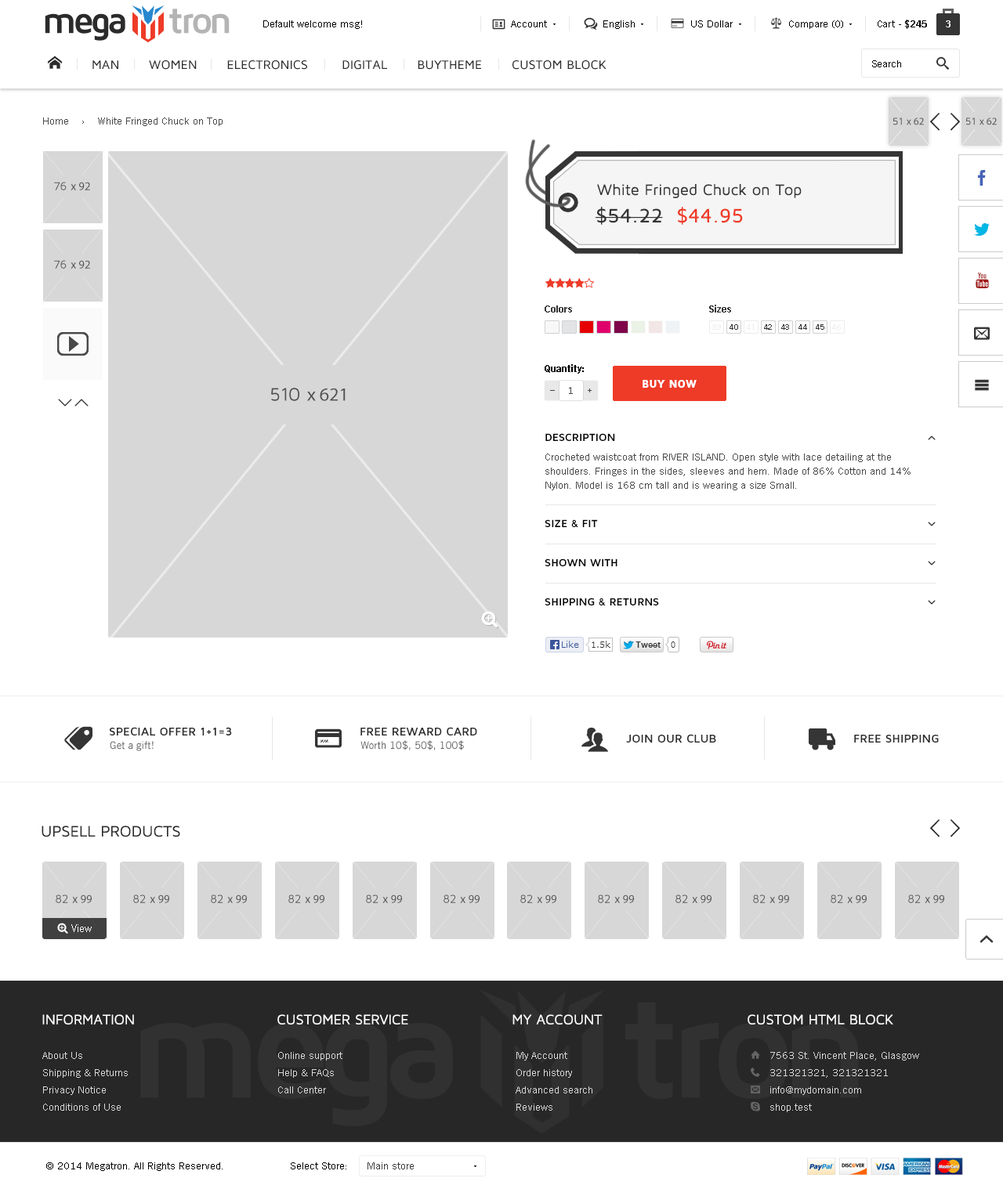
<style>
.page{position:relative;width:1003px;height:1189px;background:#ffffff}
.page>*{position:absolute;margin:0}
.t1{font:37.6px "MavenProBold";letter-spacing:-0.1em;color:#2b2b2b}
.t2{font:37.6px "MavenProBold";letter-spacing:-0.1em;color:#b4b4b4}
.t3{font:10.2px "TradeGothicW01-Roman";color:#000000}
.t4{font:10.2px "TradeGothicW01-Bold2";color:#000000}
.t5{font:9.4px "TradeGothicW01-Bold2";color:#ffffff}
.t6{font:10.2px "TradeGothicW01-Roman";color:#494949}
.t7{font:15.7px "MavenProRegular";color:#353535}
.t8{font:20.4px "MavenProMedium";color:#353535}
.t9{font:20.4px "MavenProMedium";color:#ee3b27}
.t10{font:10.2px "TradeGothicW01-Bold2";color:#353535}
.t11{font:7.8px "TradeGothicW01-Roman";color:#efefef;text-transform:uppercase}
.t12{font:7.8px "TradeGothicW01-Roman";color:#353535;text-transform:uppercase}
.t13{font:8.6px "TradeGothicW01-Bold2";color:#494949}
.t14{font:11px "MavenProBlack";color:#ffffff}
.t15{font:11px/39.2px "MavenProBold";color:#000000;text-transform:uppercase}
.t16{font:11px/47px "MavenProBold";color:#000000;text-transform:uppercase}
.t17{font:10.2px/14.1px "TradeGothicW01-Roman";color:#494949}
.t18{font:11.8px "MavenProBold";color:#2b2b2b;text-transform:uppercase}
.t19{font:10.2px "TradeGothicW01-Roman";color:#5b5b5b}
.t20{font:15.7px "MavenProRegular";color:#2b2b2b;text-transform:uppercase}
.t21{font:11px "TradeGothicW01-Roman";color:#ffffff}
.t22{font:14.1px "MavenProRegular";color:#ffffff;text-transform:uppercase}
.t23{font:10.2px/17.2px "TradeGothicW01-Roman";color:#d9d9d9}
.t24{font:10.2px "TradeGothicW01-Roman";color:#3c3c3c}
</style>
<div class="page">
<p class="t1" style="left:45px;top:9px;width:185px;height:32px">mega     <span class="t2">tron</span></p>
<p class="t3" style="left:263px;top:20px;width:99px;height:9px">Default welcome msg!</p>
<p class="t3" style="left:511px;top:20px;width:36px;height:7px">Account</p>
<p class="t3" style="left:603px;top:20px;width:32px;height:9px">English</p>
<p class="t3" style="left:691px;top:20px;width:41px;height:7px">US Dollar</p>
<p class="t3" style="left:789px;top:20px;width:54px;height:9px">Compare (0)</p>
<p class="t3" style="left:877px;top:20px;width:50px;height:9px">Cart - <span class="t4">$245</span></p>
<p class="t5" style="left:946px;top:20px;width:4px;height:7px">3</p>
<p class="t3" style="left:872px;top:60px;width:29px;height:7px">Search</p>
<p class="t6" style="left:43px;top:118px;width:179px;height:8px">Home    ›    White Fringed Chuck on Top</p>
<p class="t7" style="left:597px;top:184px;width:204px;height:14px">White Fringed Chuck on Top</p>
<p class="t8" style="left:595px;top:207px;width:148px;height:18px">$54.22  <span class="t9">$44.95</span></p>
<p class="t10" style="left:544px;top:306px;width:28px;height:7px">Colors</p>
<p class="t10" style="left:709px;top:305px;width:22px;height:8px">Sizes</p>
<p class="t11" style="left:712px;top:324px;width:9px;height:6px">39</p>
<p class="t12" style="left:729px;top:324px;width:9px;height:6px">40</p>
<p class="t11" style="left:747px;top:324px;width:7px;height:6px">41</p>
<p class="t12" style="left:764px;top:324px;width:8px;height:6px">42</p>
<p class="t12" style="left:781px;top:324px;width:8px;height:6px">43</p>
<p class="t12" style="left:798px;top:324px;width:9px;height:6px">44</p>
<p class="t12" style="left:816px;top:324px;width:8px;height:6px">45</p>
<p class="t11" style="left:832px;top:324px;width:9px;height:6px">46</p>
<p class="t4" style="left:544px;top:364px;width:40px;height:10px">Quantity:</p>
<p class="t6" style="left:569px;top:387px;width:4px;height:7px">1</p>
<p class="t13" style="left:588px;top:389px;width:3px;height:3px">+</p>
<p class="t14" style="left:642px;top:380px;width:54px;height:8px">BUY NOW</p>
<p class="t15" style="left:544px;top:433px;width:115px;height:173px">Description<br><br><span class="t16">Size &amp; Fit<br></span>Shown With<br>Shipping &amp; Returns</p>
<p class="t17" style="left:545px;top:454px;width:365px;height:36px">Crocheted waistcoat from RIVER ISLAND. Open style with lace detailing at the shoulders. Fringes in the sides, sleeves and hem. Made of 86% Cotton and 14% Nylon. Model is 168 cm tall and is wearing a size Small.</p>
<p class="t18" style="left:110px;top:727px;width:122px;height:9px">Special Offer 1+1=3</p>
<p class="t18" style="left:360px;top:727px;width:117px;height:9px">FREE REWARD CARD</p>
<p class="t18" style="left:626px;top:734px;width:90px;height:9px">Join Our Club</p>
<p class="t18" style="left:854px;top:735px;width:84px;height:8px">Free Shipping</p>
<p class="t19" style="left:110px;top:741px;width:44px;height:10px">Get a gift!</p>
<p class="t19" style="left:360px;top:740px;width:104px;height:10px">Worth 10$, 50$, 100$</p>
<p class="t20" style="left:42px;top:826px;width:138px;height:11px">UPSELL PRODUCTS</p>
<p class="t21" style="left:71px;top:924px;width:21px;height:8px">View</p>
<p class="t22" style="left:42px;top:1014px;width:92px;height:11px">Information</p>
<p class="t22" style="left:277px;top:1014px;width:131px;height:11px">customer service</p>
<p class="t22" style="left:512px;top:1014px;width:90px;height:11px">My account</p>
<p class="t22" style="left:747px;top:1014px;width:146px;height:11px">CUSTOM HTML BLOCK</p>
<p class="t23" style="left:42px;top:1052px;width:86px;height:59px">About Us<br>Shipping &amp; Returns<br>Privacy Notice<br>Conditions of Use</p>
<p class="t23" style="left:278px;top:1052px;width:64px;height:42px">Online support<br>Help &amp; FAQs<br>Call Center</p>
<p class="t23" style="left:515px;top:1052px;width:77px;height:59px">My Account<br>Order history<br>Advanced search<br>Reviews</p>
<p class="t23" style="left:770px;top:1052px;width:149px;height:60px">7563 St. Vincent Place, Glasgow<br>321321321, 321321321<br>info@mydomain.com<br>shop.test</p>
<p class="t3" style="left:46px;top:1163px;width:176px;height:8px">© 2014 Megatron. All Rights Reserved.</p>
<p class="t3" style="left:291px;top:1163px;width:55px;height:7px">Select Store:</p>
<p class="t24" style="left:367px;top:1163px;width:47px;height:7px">Main store</p>
</div>
